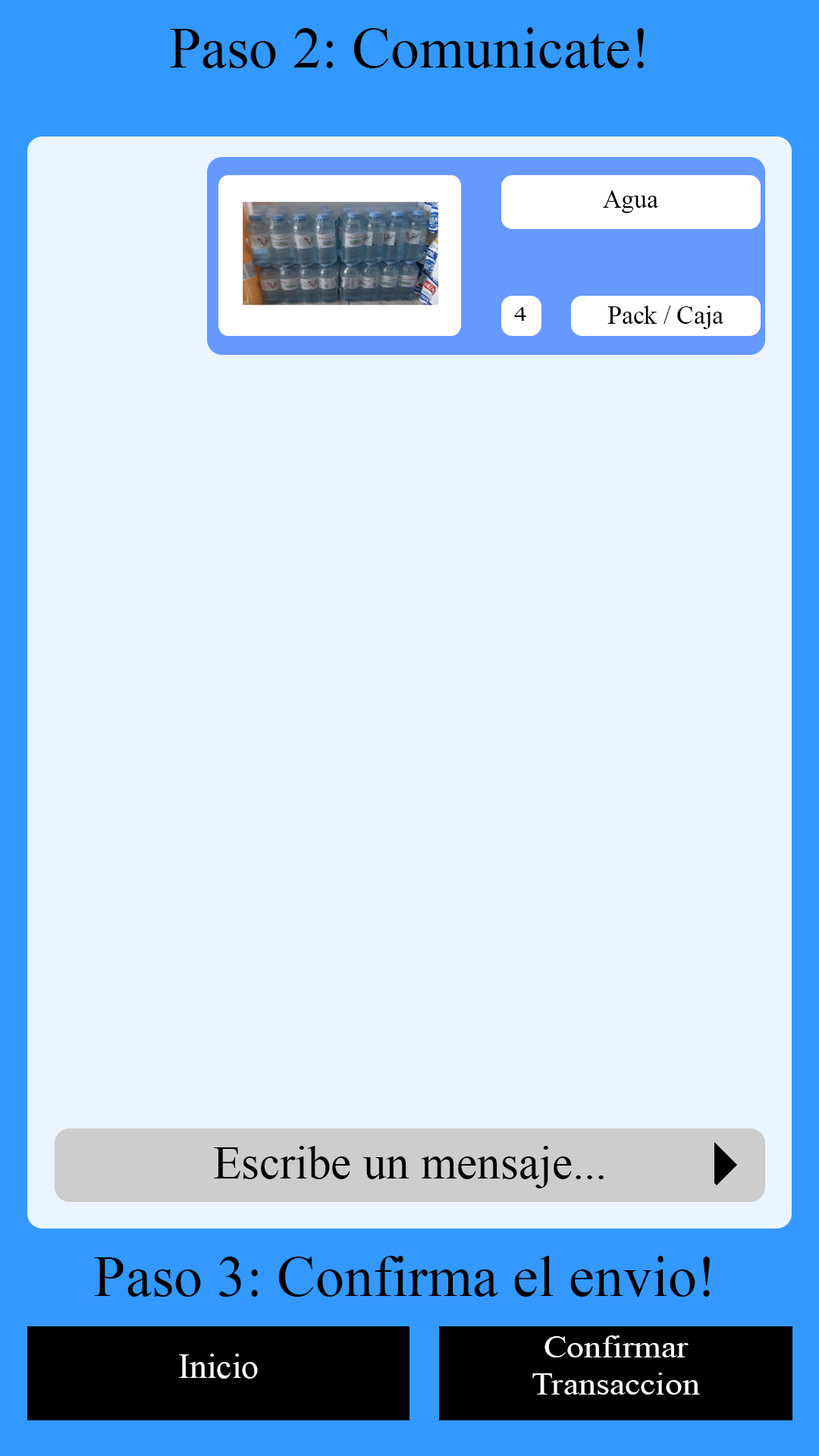
<style>
.page{position:relative;width:819px;height:1456px;background:#ebf5ff}
.page>*{position:absolute;margin:0}
.t1{font:57.8px "TimesNewRomanPSMT";color:#000000}
.t2{font:25.5px "TimesNewRomanPSMT";color:#000000}
.t3{font:20.2px "TimesNewRomanPSMT";color:#000000;scale:1.26 1}
.t4{font:46.2px "TimesNewRomanPSMT";color:#000000}
.t5{font:31.3px "TimesNewRomanPSMT";color:#ffffff;scale:1.11 1}
.t6{font:34.7px "TimesNewRomanPSMT";color:#ffffff}
</style>
<div class="page">
<p class="t1" style="left:170px;top:27px;width:474px;height:41px">Paso 2: Comunicate!</p>
<p class="t2" style="left:603px;top:190px;width:56px;height:23px">Agua</p>
<p class="t2" style="left:607px;top:306px;width:117px;height:23px">Pack / Caja</p>
<p class="t3" style="left:514px;top:307px;width:12px;height:14px">4</p>
<p class="t4" style="left:214px;top:1146px;width:390px;height:42px">Escribe un mensaje...</p>
<p class="t1" style="left:94px;top:1256px;width:616px;height:41px">Paso 3: Confirma el envio!</p>
<p class="t5" style="left:532px;top:1335px;width:168px;height:60px;text-align:center">Confirmar<br>Transaccion</p>
<p class="t6" style="left:179px;top:1354px;width:79px;height:25px">Inicio</p>
</div>
